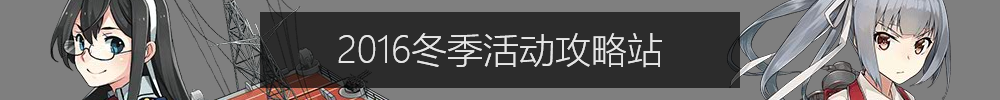
<style>
.page{position:relative;width:1000px;height:100px;background:#7f7f7f}
.page>*{position:absolute;margin:0}
.t1{font:36px "MicrosoftYaHeiUILight";color:#e6e6e6}
</style>
<div class="page">
<p class="t1" style="left:338px;top:33px;width:324px;height:35px">2016冬季活动攻略站</p>
</div>
